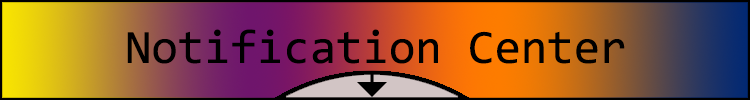
<style>
.page{position:relative;width:750px;height:100px}
.page>*{position:absolute;margin:0}
.t1{font:48px "Consolas";color:#000000}
</style>
<div class="page">
<p class="t1" style="left:127px;top:29px;width:498px;height:35px">Notification Center</p>
</div>
